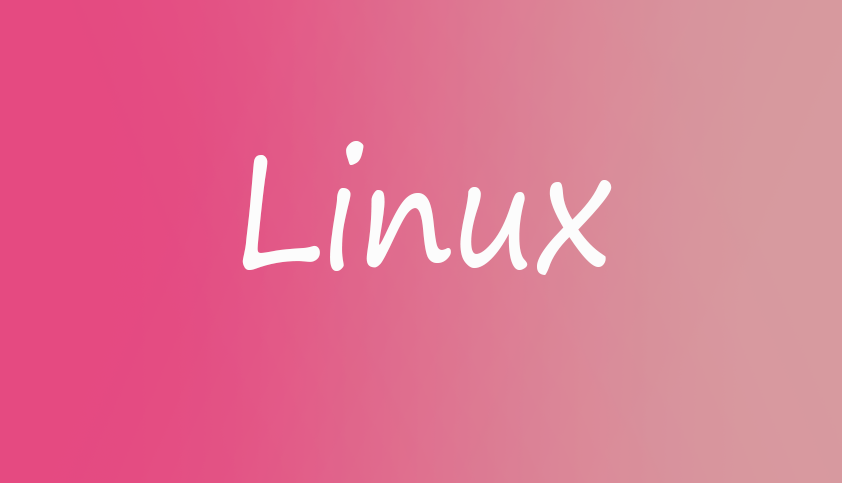
<style>
.page{position:relative;width:842px;height:483px}
.page>*{position:absolute;margin:0}
.t1{font:155.9px "SegoePrint";color:#fcfcfc;scale:0.89 1}
</style>
<div class="page">
<p class="t1" style="left:242px;top:141px;width:370px;height:134px">Linux</p>
</div>
